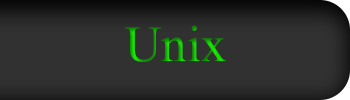
<style>
.page{position:relative;width:350px;height:100px;background:#313131}
.page>*{position:absolute;margin:0}
.t1{font:63px "Aparajita"}
</style>
<div class="page">
<p class="t1" style="left:125px;top:25px;width:101px;height:37px">Unix</p>
</div>
